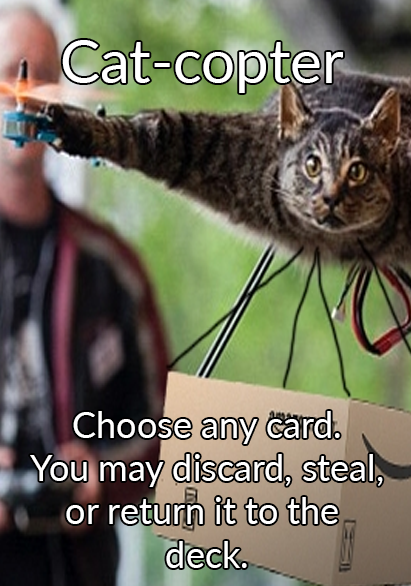
<style>
.page{position:relative;width:411px;height:586px}
.page>*{position:absolute;margin:0}
.t1{font:60px "Lato-Regular";color:#ffffff}
.t2{font:48px "Lato-Regular";color:#000000}
.t3{font:36px "Lato-Regular";color:#ffffff}
</style>
<div class="page">
<p class="t1" style="left:62px;top:40px;width:281px;height:53px"><span class="t2"><br></span>Cat-copter</p>
<p class="t3" style="left:30px;top:411px;width:353px;height:157px;text-align:center">Choose any card.<br>You may discard, steal,<br>or return it to the <br>deck.</p>
</div>
